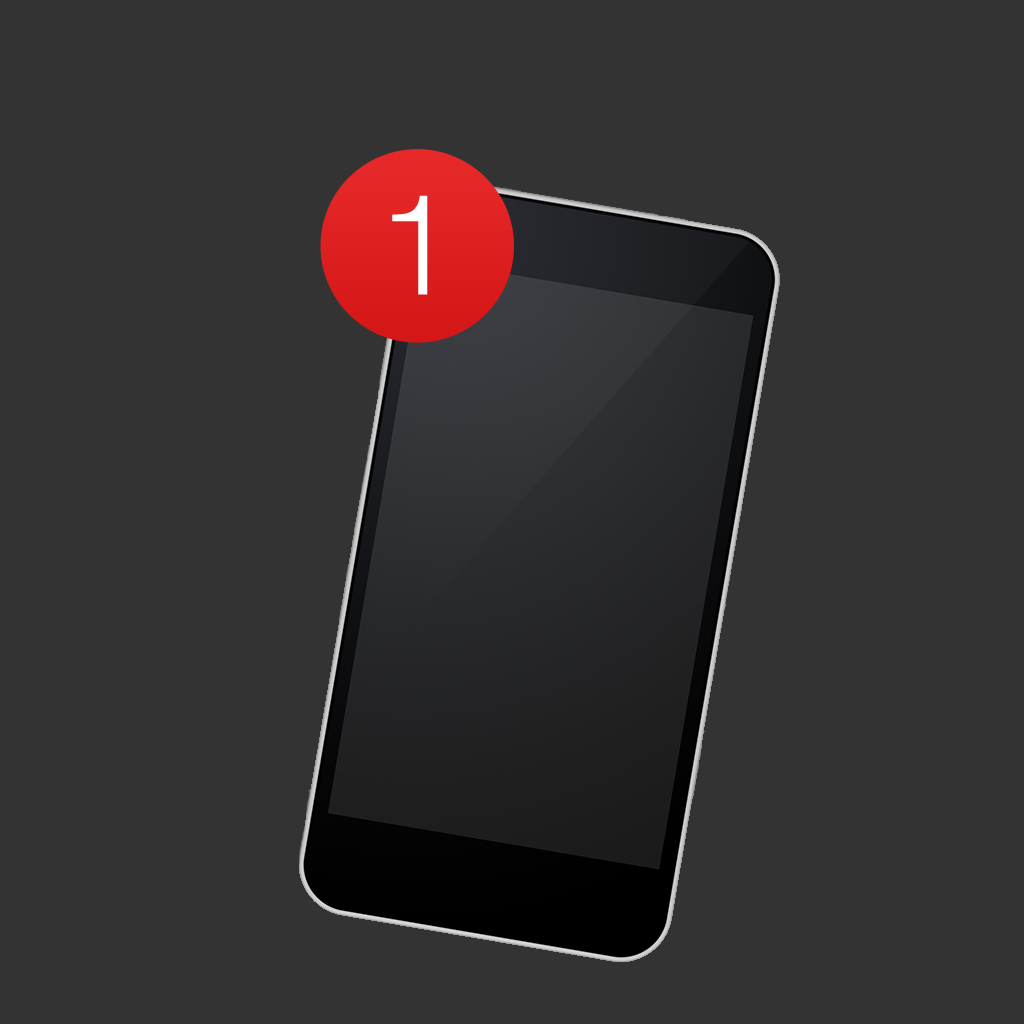
<style>
.page{position:relative;width:1024px;height:1024px;background:#333333}
.page>*{position:absolute;margin:0}
.t1{font:140.7px "HelveticaNeue-Light";letter-spacing:-0.02em;color:#ffffff}
</style>
<div class="page">
<p class="t1" style="left:392px;top:195px;width:36px;height:100px">1</p>
</div>
